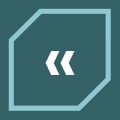
<style>
.page{position:relative;width:120px;height:120px;background:#336166}
.page>*{position:absolute;margin:0}
.t1{font:48px "TransformersMovie";color:#ffffff}
</style>
<div class="page">
<p class="t1" style="left:45px;top:51px;width:30px;height:24px">&lt;&lt;</p>
</div>
